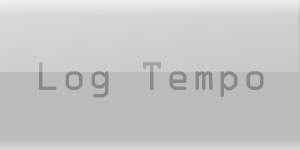
<style>
.page{position:relative;width:300px;height:150px;background:#bcbcbc}
.page>*{position:absolute;margin:0}
.t1{font:36px "OCRAStd";color:#8a8989}
</style>
<div class="page">
<p class="t1" style="left:39px;top:62px;width:225px;height:36px">Log Tempo</p>
</div>
